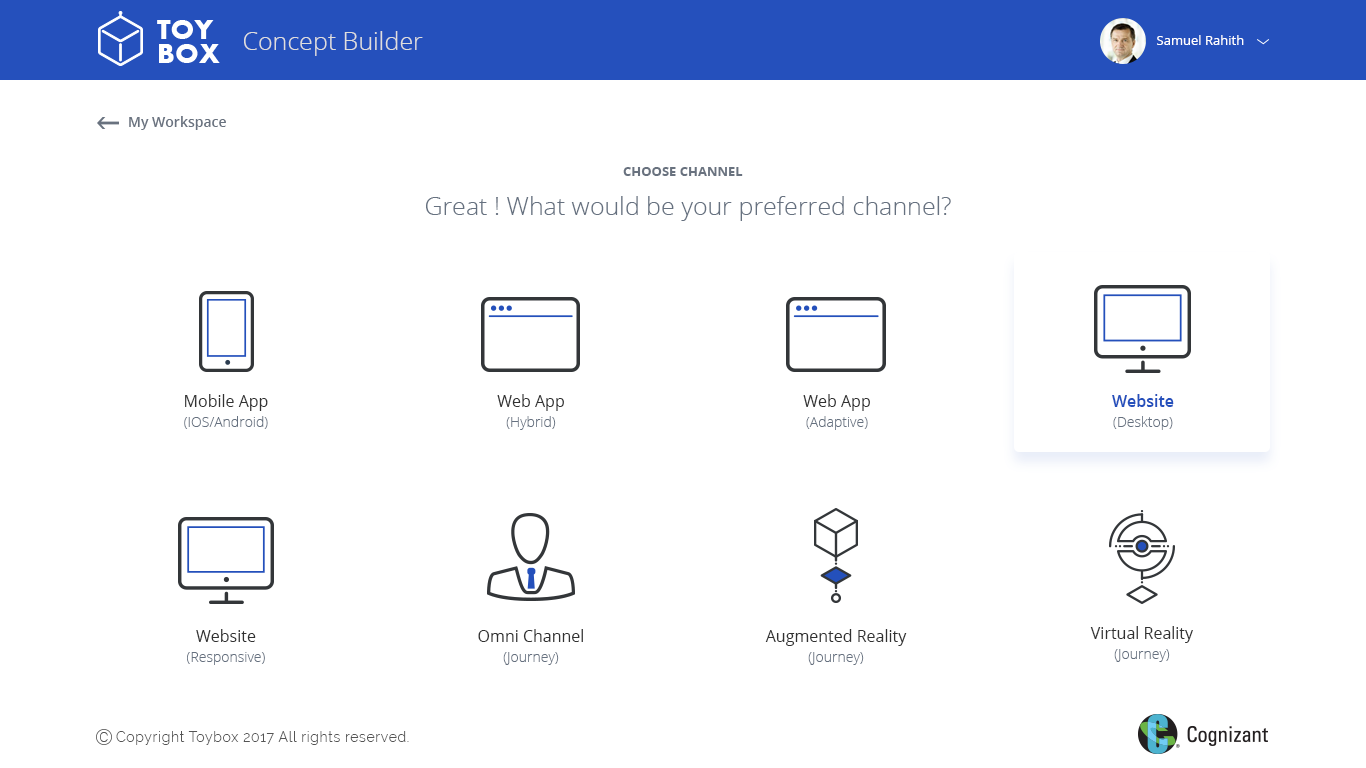
<style>
.page{position:relative;width:1366px;height:768px;background:#ffffff}
.page>*{position:absolute;margin:0}
.t1{font:25px "OpenSans-Light";color:#dedede}
.t2{font:13px "OpenSans";color:#ffffff}
.t3{font:14px "OpenSans-Semibold";color:#69727f}
.t4{font:13px "OpenSans-Bold";color:#69727f}
.t5{font:25px "OpenSans-Light";color:#667180}
.t6{font:14px/20px "OpenSans-Light";color:#667180}
.t7{font:16px/20px "OpenSans";color:#323232}
.t8{font:16px/20px "OpenSans";color:#313131}
.t9{font:16px/20px "OpenSans-Semibold";color:#2550bc}
.t10{font:18.2px "Roboto-Thin";color:#545454}
.t11{font:14px "Raleway-Light";letter-spacing:0.05em;color:#545454}
</style>
<div class="page">
<p class="t1" style="left:244px;top:31px;width:179px;height:25px">Concept Builder</p>
<p class="t2" style="left:1157px;top:35px;width:87px;height:10px">Samuel Rahith</p>
<p class="t3" style="left:129px;top:116px;width:97px;height:14px">My Workspace</p>
<p class="t4" style="left:623px;top:167px;width:120px;height:9px">CHOOSE CHANNEL</p>
<p class="t5" style="left:426px;top:196px;width:525px;height:25px">Great ! What would be your preferred channel?</p>
<p class="t6" style="left:184px;top:394px;width:84px;height:35px;text-align:center"><span class="t7">Mobile App<br></span>(IOS/Android)</p>
<p class="t6" style="left:497px;top:394px;width:67px;height:36px;text-align:center"><span class="t8">Web App<br></span>(Hybrid)</p>
<p class="t6" style="left:803px;top:394px;width:67px;height:36px;text-align:center"><span class="t8">Web App<br></span>(Adaptive)</p>
<p class="t6" style="left:1112px;top:394px;width:62px;height:36px;text-align:center"><span class="t9">Website<br></span>(Desktop)</p>
<p class="t6" style="left:187px;top:629px;width:78px;height:36px;text-align:center"><span class="t8">Website<br></span>(Responsive)</p>
<p class="t8" style="left:478px;top:629px;width:105px;height:36px;text-align:center">Omni Channel<br><span class="t6">(Journey)</span></p>
<p class="t8" style="left:765px;top:629px;width:142px;height:36px;text-align:center">Augmented Reality<br><span class="t6">(Journey)</span></p>
<p class="t8" style="left:1090px;top:626px;width:103px;height:36px;text-align:center">Virtual Reality<br><span class="t6">(Journey)</span></p>
<p class="t10" style="left:100px;top:732px;width:8px;height:10px">c</p>
<p class="t11" style="left:116px;top:731px;width:293px;height:14px">Copyright Toybox 2017 All rights reserved.</p>
</div>
